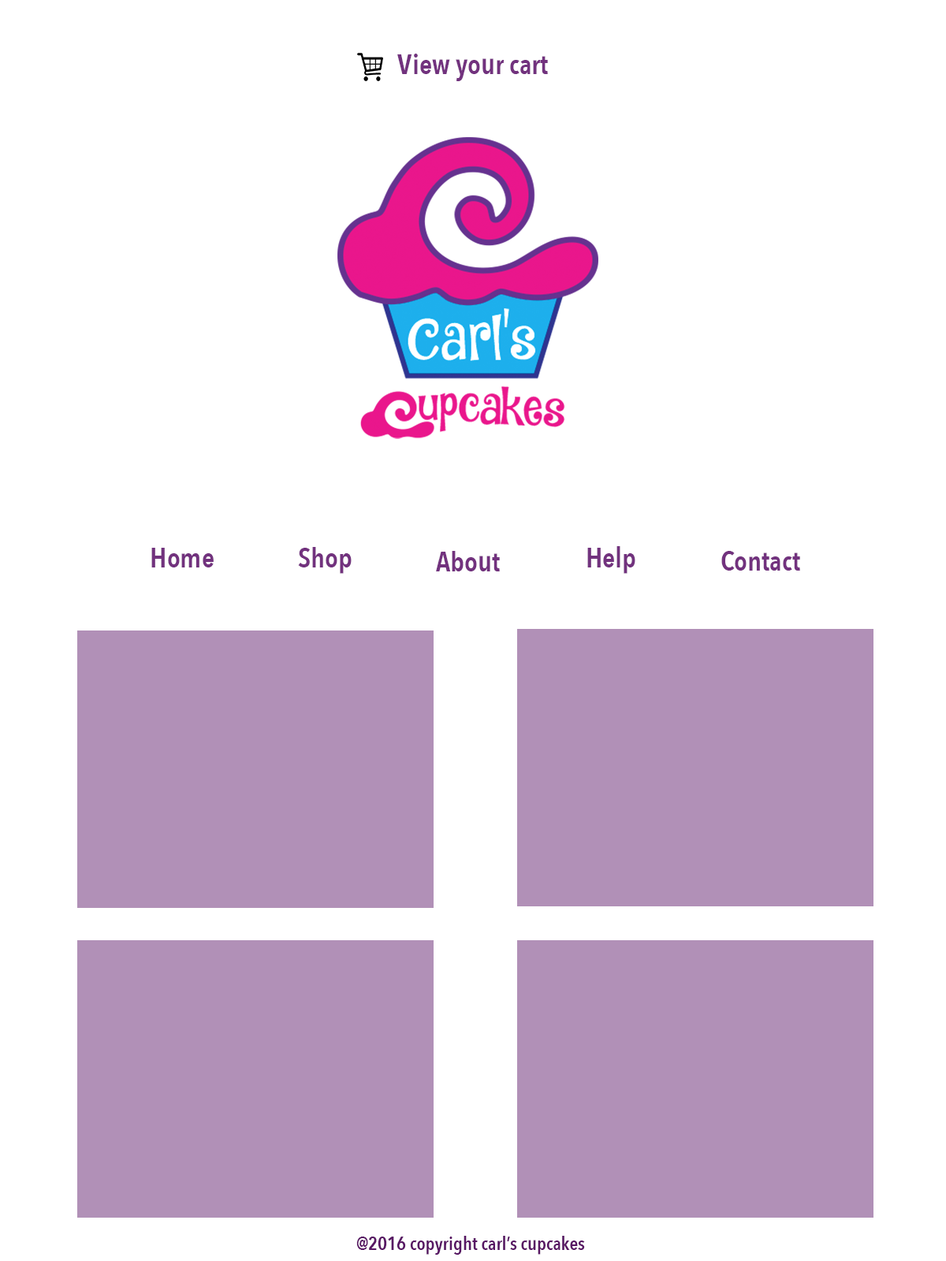
<style>
.page{position:relative;width:946px;height:1261px;background:#ffffff}
.page>*{position:absolute;margin:0}
.t1{font:28.4px "AvenirNextCondensed-DemiBold";color:#72327e}
.t2{font:18.9px "AvenirNextCondensed-DemiBold";color:#581664}
</style>
<div class="page">
<p class="t1" style="left:397px;top:54px;width:151px;height:27px">View your cart</p>
<p class="t1" style="left:151px;top:548px;width:63px;height:19px">Home</p>
<p class="t1" style="left:298px;top:547px;width:53px;height:27px">Shop</p>
<p class="t1" style="left:436px;top:551px;width:64px;height:20px">About</p>
<p class="t1" style="left:587px;top:546px;width:48px;height:28px">Help</p>
<p class="t1" style="left:721px;top:551px;width:79px;height:20px">Contact</p>
<p class="t2" style="left:356px;top:1236px;width:229px;height:19px">@2016 copyright carl’s cupcakes</p>
</div>
